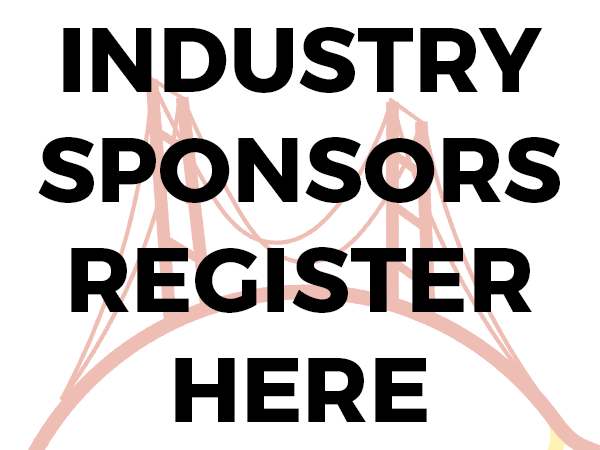
<style>
.page{position:relative;width:600px;height:450px;background:#ffffff}
.page>*{position:absolute;margin:0}
.t1{font:91.7px "Montserrat-Bold";color:#000000}
</style>
<div class="page">
<p class="t1" style="left:38px;top:27px;width:522px;height:395px;text-align:center">INDUSTRY<br>SPONSORS<br>REGISTER<br>HERE</p>
</div>
